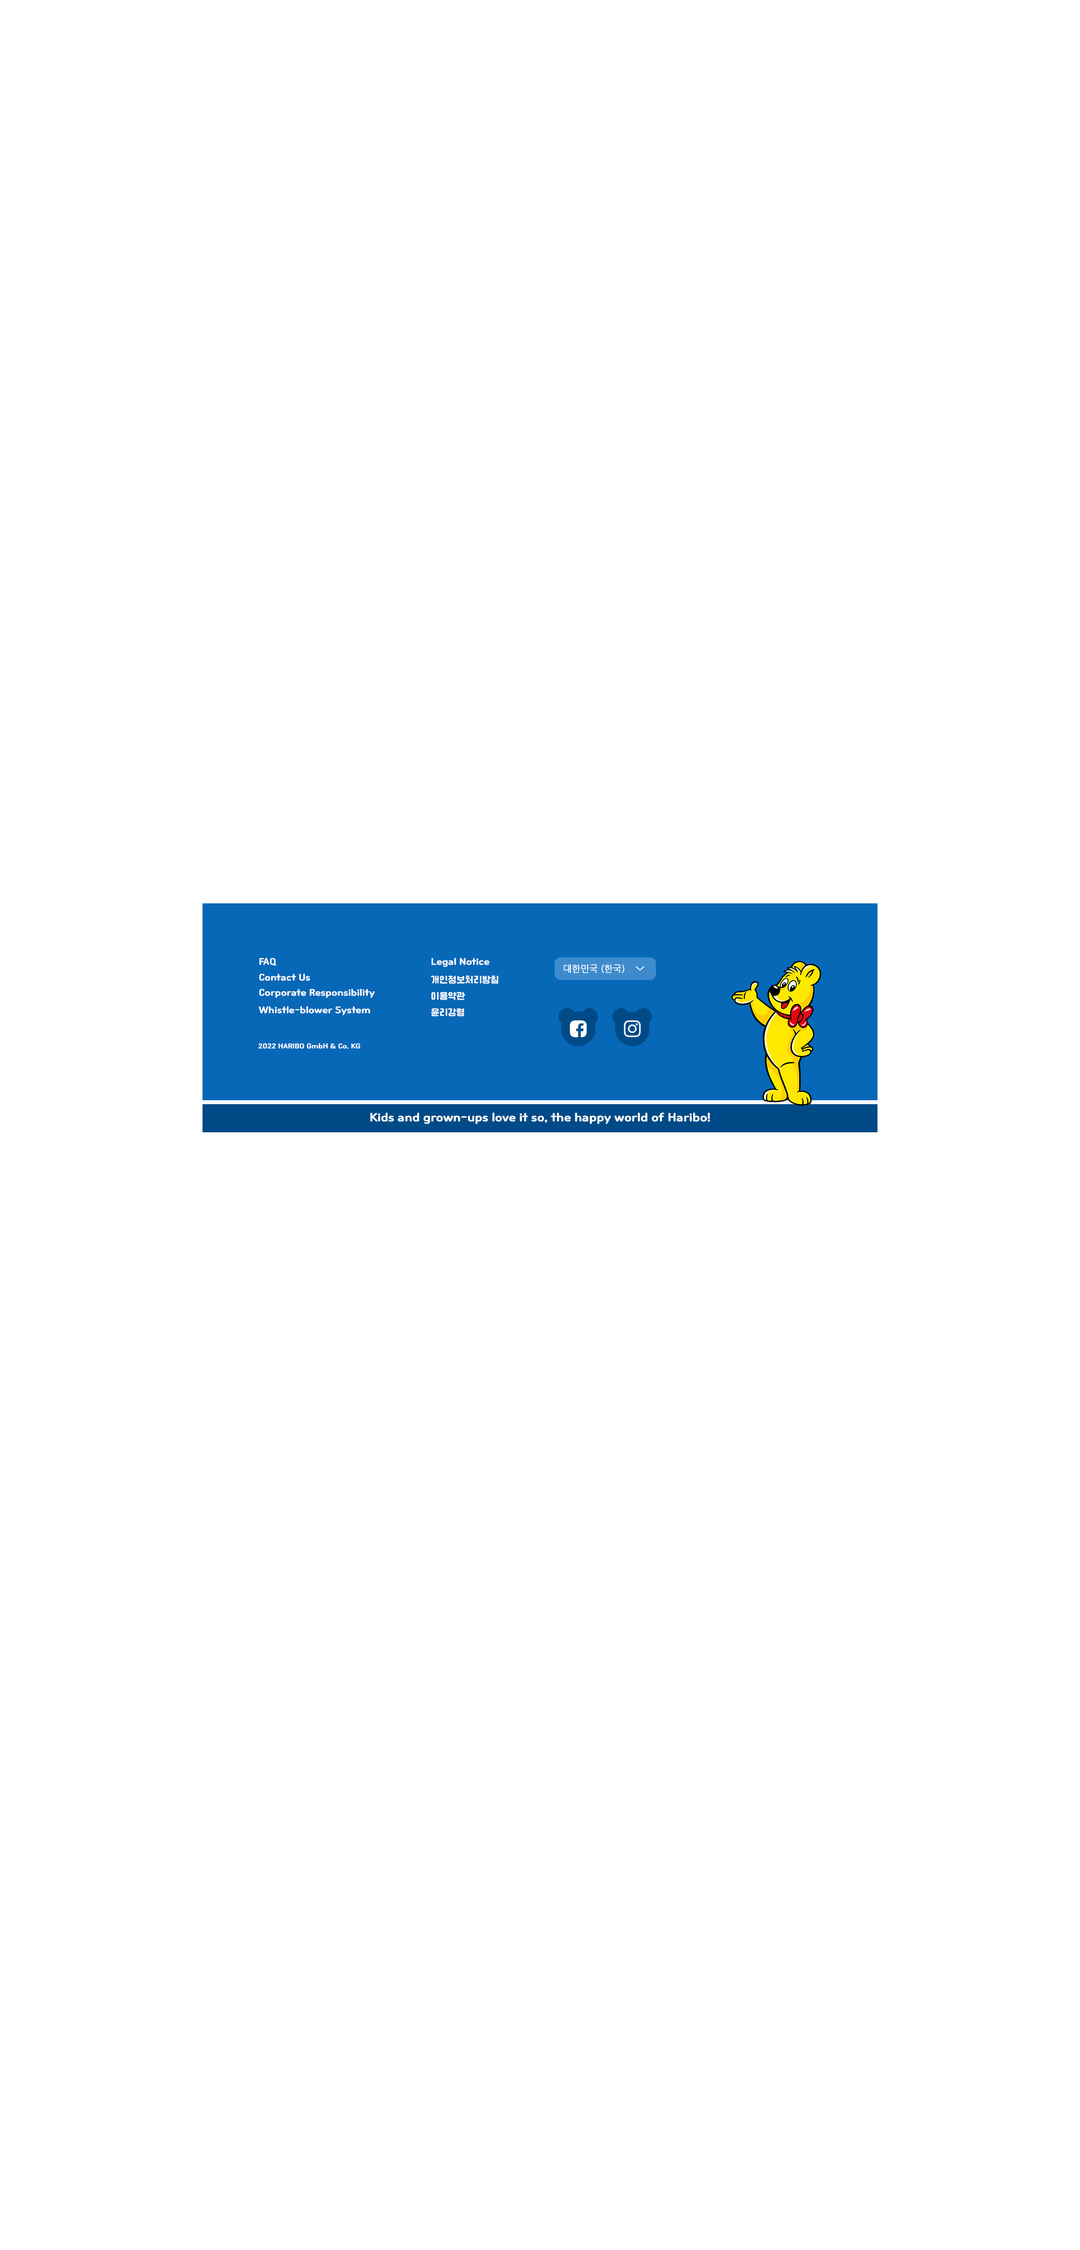
<style>
.page{position:relative;width:1080px;height:2250px;background:#ffffff}
.page>*{position:absolute;margin:0}
.t1{font:9px "Cafe24Ssurround";color:#ffffff}
.t2{font:9px "NanumGothic";color:#ffffff;font-weight:bold}
.t3{font:6.8px "Cafe24Ssurround";color:#ffffff}
.t4{font:11.2px "Cafe24Ssurround";color:#ffffff}
</style>
<div class="page">
<p class="t1" style="left:259px;top:958px;width:17px;height:8px">FAQ</p>
<p class="t1" style="left:431px;top:958px;width:58px;height:9px">Legal Notice</p>
<p class="t2" style="left:564px;top:964px;width:60px;height:9px">대한민국 (한국)</p>
<p class="t1" style="left:259px;top:974px;width:51px;height:7px">Contact Us</p>
<p class="t1" style="left:431px;top:975px;width:67px;height:9px">개인정보처리방침</p>
<p class="t2" style="left:636px;top:966px;width:9px;height:5px;rotate:90deg">&gt;</p>
<p class="t1" style="left:259px;top:989px;width:116px;height:9px">Corporate Responsibility</p>
<p class="t1" style="left:431px;top:992px;width:34px;height:8px">이용약관</p>
<p class="t1" style="left:259px;top:1006px;width:111px;height:9px">Whistle-blower System</p>
<p class="t1" style="left:431px;top:1008px;width:33px;height:8px">윤리강령</p>
<p class="t3" style="left:258px;top:1043px;width:103px;height:6px">2022 HARIBO GmbH &amp; Co. KG</p>
<p class="t4" style="left:370px;top:1113px;width:340px;height:11px">Kids and grown-ups love it so, the happy world of Haribo!</p>
</div>
